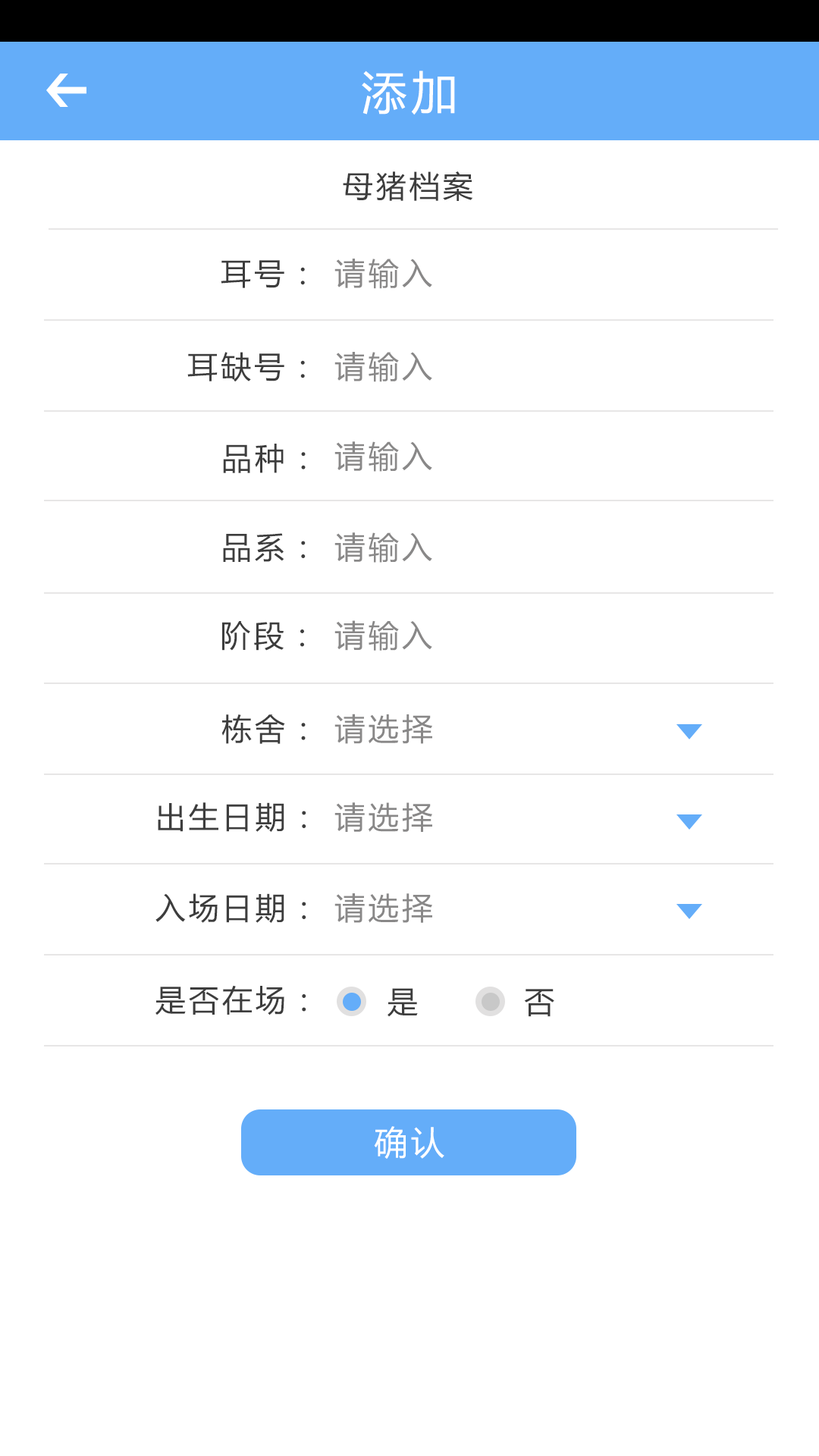
<style>
.page{position:relative;width:819px;height:1456px;background:#ffffff}
.page>*{position:absolute;margin:0}
.t1{font:45.5px "MicrosoftYaHei";letter-spacing:0.1em;color:#ffffff}
.t2{font:30.3px "MicrosoftYaHei";letter-spacing:0.1em;color:#3d3d3d}
.t3{font:30.7px "MicrosoftYaHei";letter-spacing:0.1em;color:#898888}
.t4{font:33.4px "MicrosoftYaHei";letter-spacing:0.1em;color:#ffffff}
</style>
<div class="page">
<p class="t1" style="left:362px;top:71px;width:93px;height:44px">添加</p>
<p class="t2" style="left:343px;top:171px;width:130px;height:30px">母猪档案</p>
<p class="t2" style="left:221px;top:260px;width:84px;height:28px">耳号：</p>
<p class="t3" style="left:334px;top:259px;width:98px;height:30px">请输入</p>
<p class="t2" style="left:187px;top:352px;width:118px;height:30px">耳缺号：</p>
<p class="t3" style="left:334px;top:352px;width:98px;height:30px">请输入</p>
<p class="t2" style="left:223px;top:444px;width:83px;height:29px">品种：</p>
<p class="t3" style="left:334px;top:441px;width:98px;height:31px">请输入</p>
<p class="t2" style="left:223px;top:533px;width:83px;height:29px">品系：</p>
<p class="t3" style="left:334px;top:532px;width:98px;height:31px">请输入</p>
<p class="t2" style="left:222px;top:621px;width:82px;height:30px">阶段：</p>
<p class="t3" style="left:334px;top:620px;width:98px;height:31px">请输入</p>
<p class="t3" style="left:334px;top:714px;width:98px;height:30px">请选择</p>
<p class="t2" style="left:221px;top:714px;width:85px;height:30px">栋舍：</p>
<p class="t2" style="left:158px;top:802px;width:148px;height:30px">出生日期：</p>
<p class="t3" style="left:334px;top:802px;width:98px;height:30px">请选择</p>
<p class="t2" style="left:155px;top:893px;width:151px;height:30px">入场日期：</p>
<p class="t3" style="left:334px;top:893px;width:98px;height:30px">请选择</p>
<p class="t2" style="left:155px;top:985px;width:151px;height:30px">是否在场：</p>
<p class="t2" style="left:388px;top:988px;width:30px;height:29px">是</p>
<p class="t2" style="left:524px;top:989px;width:30px;height:28px">否</p>
<p class="t4" style="left:374px;top:1126px;width:70px;height:33px">确认</p>
</div>
